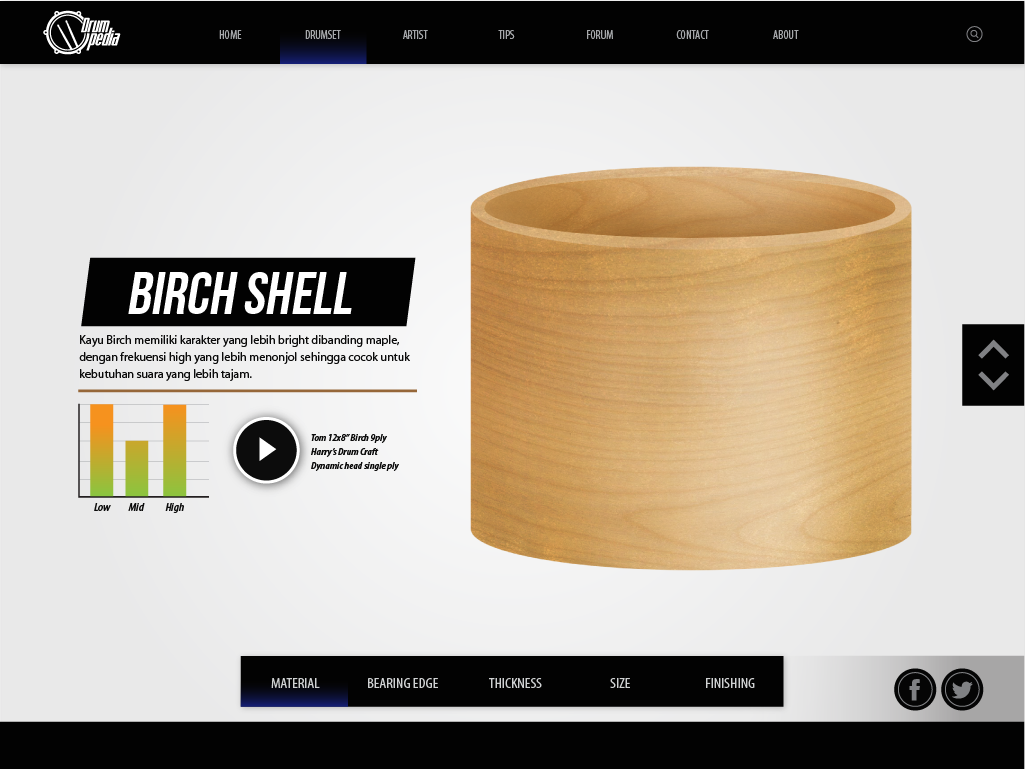
<style>
.page{position:relative;width:1025px;height:769px}
.page>*{position:absolute;margin:0}
.t1{font:12px "Myriad-Condensed";color:#a6a8ab}
.t2{font:60px "BebasNeue";color:#ffffff}
.t3{font:12px/16.6px "Myriad-Roman";color:#0c0c0c}
.t4{font:10px "Myriad-CnSemiboldItalic";color:#0c0c0c;scale:1.14 1}
.t5{font:11.1px "Myriad-CnSemiboldItalic";color:#0c0c0c;scale:1.14 1}
.t6{font:14px "Myriad-Condensed";color:#d0d2d3;scale:1.14 1}
</style>
<div class="page">
<p class="t1" style="left:219px;top:30px;width:23px;height:9px">HOME</p>
<p class="t1" style="left:305px;top:30px;width:36px;height:9px">DRUMSET</p>
<p class="t1" style="left:403px;top:30px;width:25px;height:9px">ARTIST</p>
<p class="t1" style="left:498px;top:30px;width:17px;height:9px">TIPS</p>
<p class="t1" style="left:587px;top:30px;width:26px;height:9px">FORUM</p>
<p class="t1" style="left:676px;top:30px;width:33px;height:9px">CONTACT</p>
<p class="t1" style="left:773px;top:30px;width:26px;height:9px">ABOUT</p>
<p class="t2" style="left:128px;top:272px;width:224px;height:42px">BIRCH SHELL</p>
<p class="t3" style="left:79px;top:335px;width:331px;height:46px">Kayu Birch memiliki karakter yang lebih bright dibanding maple, dengan frekuensi high yang lebih menonjol sehingga cocok untuk kebutuhan suara yang lebih tajam.</p>
<p class="t4" style="left:311px;top:434px;width:76px;height:9px">Tom 12x8” Birch 9ply</p>
<p class="t4" style="left:311px;top:448px;width:68px;height:9px">Harry’s Drum Craft</p>
<p class="t4" style="left:311px;top:462px;width:88px;height:9px">Dynamic head single ply</p>
<p class="t5" style="left:94px;top:503px;width:17px;height:8px">Low</p>
<p class="t5" style="left:128px;top:503px;width:17px;height:8px">Mid</p>
<p class="t5" style="left:165px;top:503px;width:19px;height:10px">High</p>
<p class="t6" style="left:271px;top:678px;width:49px;height:10px">MATERIAL</p>
<p class="t6" style="left:368px;top:678px;width:70px;height:10px">BEARING EDGE</p>
<p class="t6" style="left:489px;top:678px;width:53px;height:10px">THICKNESS</p>
<p class="t6" style="left:610px;top:678px;width:20px;height:10px">SIZE</p>
<p class="t6" style="left:706px;top:678px;width:49px;height:10px">FINISHING</p>
</div>
